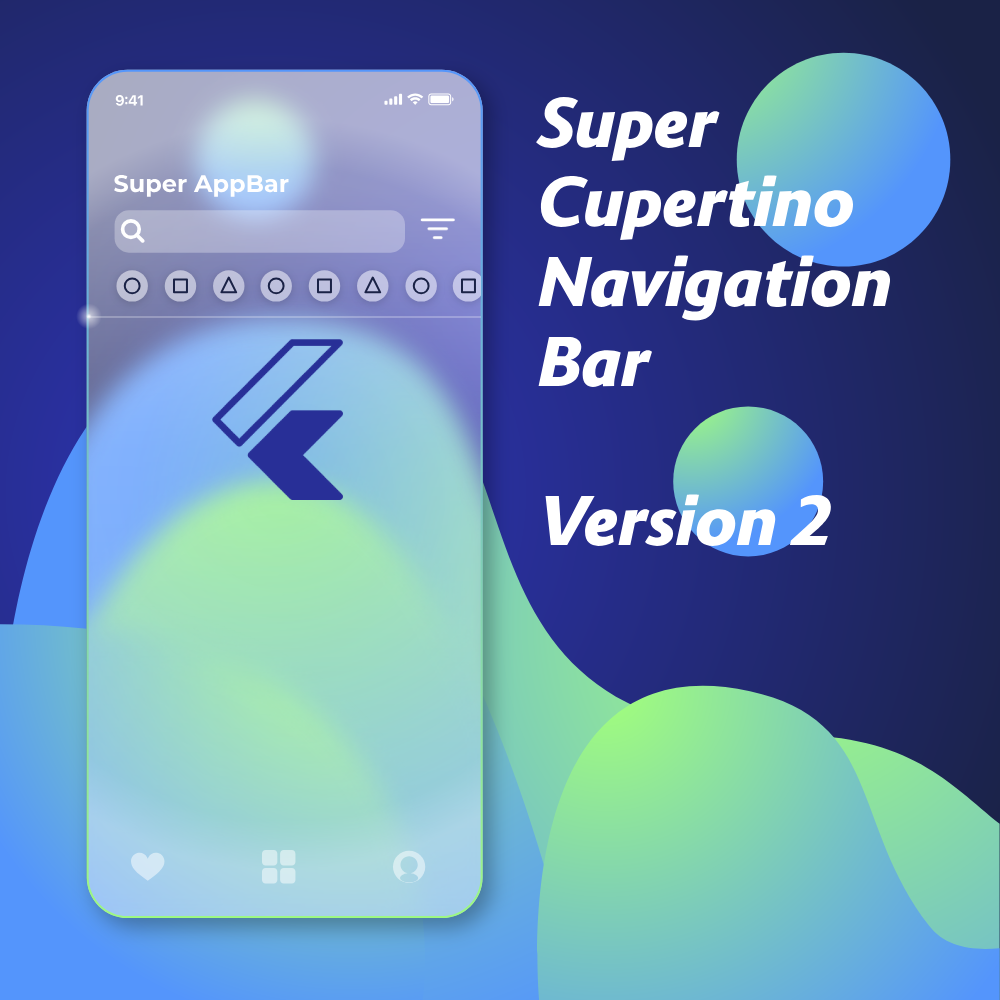
<style>
.page{position:relative;width:1000px;height:1000px}
.page>*{position:absolute;margin:0}
.t1{font:66.4px "Route159-HeavyItalic";color:#ffffff}
.t2{font:24px "Montserrat-Bold";color:#ffffff}
</style>
<div class="page">
<p class="t1" style="left:536px;top:96px;width:355px;height:450px;text-align:justify">Super<br>Cupertino<br>Navigation<br>Bar <br><br>Version 2</p>
<p class="t2" style="left:114px;top:174px;width:175px;height:23px">Super AppBar</p>
</div>
